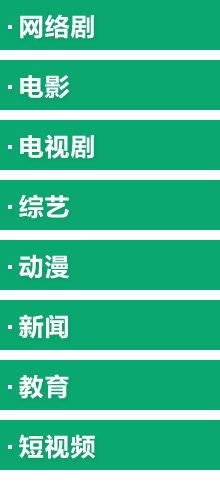
<style>
.page{position:relative;width:220px;height:500px;background:#0aa770}
.page>*{position:absolute;margin:0}
.t1{font:26px "FZLTCHJW--GB1-0";color:#ffffff}
</style>
<div class="page">
<p class="t1" style="left:20px;top:14px;width:74px;height:25px">网络剧</p>
<p class="t1" style="left:20px;top:75px;width:50px;height:24px">电影</p>
<p class="t1" style="left:20px;top:134px;width:74px;height:25px">电视剧</p>
<p class="t1" style="left:19px;top:194px;width:50px;height:25px">综艺</p>
<p class="t1" style="left:19px;top:254px;width:50px;height:25px">动漫</p>
<p class="t1" style="left:19px;top:314px;width:49px;height:25px">新闻</p>
<p class="t1" style="left:19px;top:374px;width:50px;height:25px">教育</p>
<p class="t1" style="left:19px;top:434px;width:77px;height:25px">短视频</p>
</div>
